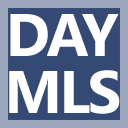
<style>
.page{position:relative;width:128px;height:128px;background:#344a74}
.page>*{position:absolute;margin:0}
.t1{font:60px "SegoeUI-Bold";letter-spacing:-0.04em;color:#ffffff;font-variant:small-caps}
</style>
<div class="page">
<p class="t1" style="left:10px;top:14px;width:109px;height:42px">DAY</p>
<p class="t1" style="left:9px;top:70px;width:111px;height:44px">MLS</p>
</div>
